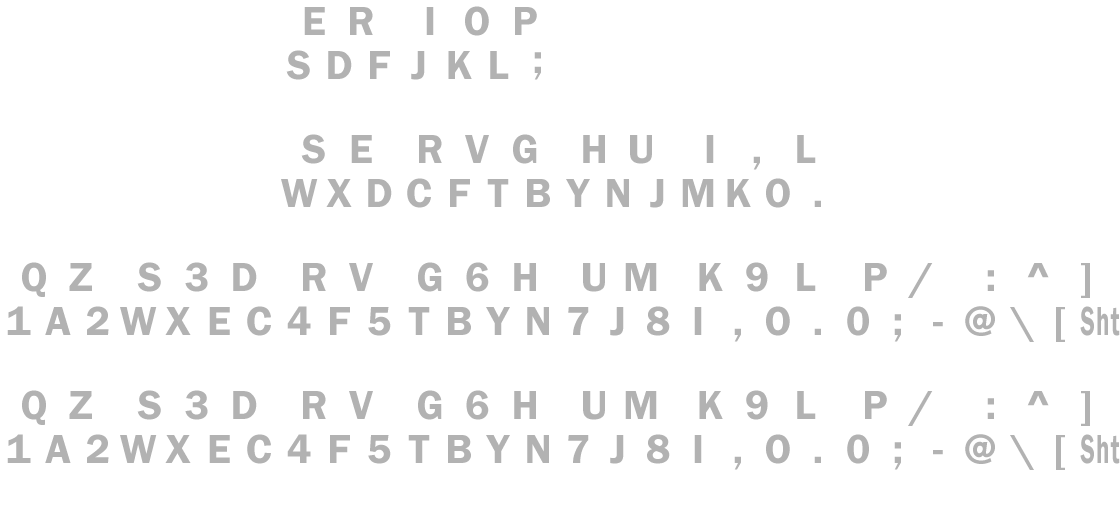
<style>
.page{position:relative;width:1120px;height:512px;background:#ffffff}
.page>*{position:absolute;margin:0}
.t1{font:42px "FranklinGothic-Demi";letter-spacing:0.05em;color:#b2b2b2}
.t2{font:42px "FranklinGothic-Demi";letter-spacing:0.05em;color:#b2b2b2;scale:0.59 1}
</style>
<div class="page">
<p class="t1" style="left:465px;top:6px;width:24px;height:30px">O</p>
<p class="t1" style="left:304px;top:7px;width:21px;height:28px">E</p>
<p class="t1" style="left:350px;top:7px;width:23px;height:28px">R</p>
<p class="t1" style="left:426px;top:7px;width:8px;height:28px">I</p>
<p class="t1" style="left:515px;top:7px;width:22px;height:28px">P</p>
<p class="t1" style="left:286px;top:50px;width:24px;height:30px">S</p>
<p class="t1" style="left:328px;top:51px;width:24px;height:28px">D</p>
<p class="t1" style="left:370px;top:51px;width:20px;height:28px">F</p>
<p class="t1" style="left:411px;top:51px;width:14px;height:29px">J</p>
<p class="t1" style="left:448px;top:51px;width:24px;height:28px">K</p>
<p class="t1" style="left:490px;top:51px;width:19px;height:28px">L</p>
<p class="t1" style="left:534px;top:52px;width:7px;height:28px">;</p>
<p class="t1" style="left:301px;top:134px;width:24px;height:30px">S</p>
<p class="t1" style="left:351px;top:135px;width:21px;height:28px">E</p>
<p class="t1" style="left:419px;top:135px;width:23px;height:28px">R</p>
<p class="t1" style="left:465px;top:135px;width:24px;height:28px">V</p>
<p class="t1" style="left:513px;top:134px;width:24px;height:30px">G</p>
<p class="t1" style="left:583px;top:135px;width:22px;height:28px">H</p>
<p class="t1" style="left:630px;top:135px;width:22px;height:29px">U</p>
<p class="t1" style="left:706px;top:135px;width:8px;height:28px">I</p>
<p class="t1" style="left:797px;top:135px;width:19px;height:28px">L</p>
<p class="t1" style="left:753px;top:156px;width:7px;height:14px">,</p>
<p class="t1" style="left:281px;top:179px;width:37px;height:28px">W</p>
<p class="t1" style="left:326px;top:179px;width:26px;height:28px">X</p>
<p class="t1" style="left:368px;top:179px;width:24px;height:28px">D</p>
<p class="t1" style="left:407px;top:178px;width:24px;height:30px">C</p>
<p class="t1" style="left:450px;top:179px;width:20px;height:28px">F</p>
<p class="t1" style="left:487px;top:179px;width:22px;height:28px">T</p>
<p class="t1" style="left:527px;top:179px;width:23px;height:28px">B</p>
<p class="t1" style="left:566px;top:179px;width:24px;height:28px">Y</p>
<p class="t1" style="left:607px;top:179px;width:22px;height:28px">N</p>
<p class="t1" style="left:650px;top:179px;width:14px;height:29px">J</p>
<p class="t1" style="left:682px;top:179px;width:32px;height:28px">M</p>
<p class="t1" style="left:727px;top:179px;width:24px;height:28px">K</p>
<p class="t1" style="left:766px;top:178px;width:24px;height:30px">O</p>
<p class="t1" style="left:814px;top:200px;width:7px;height:7px">.</p>
<p class="t1" style="left:22px;top:262px;width:24px;height:35px">Q</p>
<p class="t1" style="left:69px;top:263px;width:23px;height:28px">Z</p>
<p class="t1" style="left:137px;top:262px;width:24px;height:30px">S</p>
<p class="t1" style="left:185px;top:262px;width:23px;height:30px">3</p>
<p class="t1" style="left:233px;top:263px;width:24px;height:28px">D</p>
<p class="t1" style="left:303px;top:263px;width:23px;height:28px">R</p>
<p class="t1" style="left:349px;top:263px;width:24px;height:28px">V</p>
<p class="t1" style="left:418px;top:262px;width:24px;height:30px">G</p>
<p class="t1" style="left:466px;top:262px;width:23px;height:30px">6</p>
<p class="t1" style="left:514px;top:263px;width:22px;height:28px">H</p>
<p class="t1" style="left:583px;top:263px;width:22px;height:29px">U</p>
<p class="t1" style="left:625px;top:263px;width:32px;height:28px">M</p>
<p class="t1" style="left:699px;top:263px;width:24px;height:28px">K</p>
<p class="t1" style="left:746px;top:262px;width:22px;height:30px">9</p>
<p class="t1" style="left:797px;top:263px;width:19px;height:28px">L</p>
<p class="t1" style="left:865px;top:263px;width:22px;height:28px">P</p>
<p class="t1" style="left:908px;top:263px;width:25px;height:35px">/</p>
<p class="t1" style="left:987px;top:270px;width:7px;height:21px">:</p>
<p class="t1" style="left:1027px;top:263px;width:22px;height:15px">^</p>
<p class="t1" style="left:1081px;top:263px;width:9px;height:35px">]</p>
<p class="t1" style="left:7px;top:306px;width:24px;height:29px">1</p>
<p class="t1" style="left:45px;top:307px;width:26px;height:28px">A</p>
<p class="t1" style="left:87px;top:306px;width:22px;height:29px">2</p>
<p class="t1" style="left:120px;top:307px;width:37px;height:28px">W</p>
<p class="t1" style="left:165px;top:307px;width:26px;height:28px">X</p>
<p class="t1" style="left:209px;top:307px;width:21px;height:28px">E</p>
<p class="t1" style="left:247px;top:306px;width:24px;height:30px">C</p>
<p class="t1" style="left:287px;top:306px;width:24px;height:29px">4</p>
<p class="t1" style="left:330px;top:307px;width:20px;height:28px">F</p>
<p class="t1" style="left:368px;top:307px;width:23px;height:29px">5</p>
<p class="t1" style="left:408px;top:307px;width:22px;height:28px">T</p>
<p class="t1" style="left:448px;top:307px;width:23px;height:28px">B</p>
<p class="t1" style="left:486px;top:307px;width:24px;height:28px">Y</p>
<p class="t1" style="left:527px;top:307px;width:22px;height:28px">N</p>
<p class="t1" style="left:568px;top:307px;width:21px;height:28px">7</p>
<p class="t1" style="left:610px;top:307px;width:14px;height:29px">J</p>
<p class="t1" style="left:647px;top:306px;width:23px;height:30px">8</p>
<p class="t1" style="left:694px;top:307px;width:8px;height:28px">I</p>
<p class="t1" style="left:766px;top:306px;width:24px;height:30px">O</p>
<p class="t1" style="left:847px;top:306px;width:22px;height:30px">0</p>
<p class="t1" style="left:894px;top:314px;width:7px;height:28px">;</p>
<p class="t1" style="left:965px;top:306px;width:30px;height:30px">@</p>
<p class="t1" style="left:1010px;top:307px;width:24px;height:35px">\</p>
<p class="t1" style="left:1056px;top:307px;width:9px;height:35px">[</p>
<p class="t2" style="left:1080px;top:306px;width:40px;height:30px">Sht</p>
<p class="t1" style="left:734px;top:328px;width:7px;height:14px">,</p>
<p class="t1" style="left:814px;top:328px;width:7px;height:7px">.</p>
<p class="t1" style="left:933px;top:322px;width:10px;height:5px">-</p>
<p class="t1" style="left:22px;top:390px;width:24px;height:35px">Q</p>
<p class="t1" style="left:137px;top:390px;width:24px;height:30px">S</p>
<p class="t1" style="left:185px;top:390px;width:23px;height:30px">3</p>
<p class="t1" style="left:418px;top:390px;width:24px;height:30px">G</p>
<p class="t1" style="left:466px;top:390px;width:23px;height:30px">6</p>
<p class="t1" style="left:746px;top:390px;width:22px;height:30px">9</p>
<p class="t1" style="left:69px;top:391px;width:23px;height:28px">Z</p>
<p class="t1" style="left:233px;top:391px;width:24px;height:28px">D</p>
<p class="t1" style="left:303px;top:391px;width:23px;height:28px">R</p>
<p class="t1" style="left:349px;top:391px;width:24px;height:28px">V</p>
<p class="t1" style="left:514px;top:391px;width:22px;height:28px">H</p>
<p class="t1" style="left:583px;top:391px;width:22px;height:29px">U</p>
<p class="t1" style="left:625px;top:391px;width:32px;height:28px">M</p>
<p class="t1" style="left:699px;top:391px;width:24px;height:28px">K</p>
<p class="t1" style="left:797px;top:391px;width:19px;height:28px">L</p>
<p class="t1" style="left:865px;top:391px;width:22px;height:28px">P</p>
<p class="t1" style="left:908px;top:391px;width:25px;height:35px">/</p>
<p class="t1" style="left:987px;top:398px;width:7px;height:21px">:</p>
<p class="t1" style="left:1027px;top:391px;width:22px;height:15px">^</p>
<p class="t1" style="left:1081px;top:391px;width:9px;height:35px">]</p>
<p class="t1" style="left:7px;top:434px;width:24px;height:29px">1</p>
<p class="t1" style="left:45px;top:435px;width:26px;height:28px">A</p>
<p class="t1" style="left:87px;top:434px;width:22px;height:29px">2</p>
<p class="t1" style="left:120px;top:435px;width:37px;height:28px">W</p>
<p class="t1" style="left:165px;top:435px;width:26px;height:28px">X</p>
<p class="t1" style="left:209px;top:435px;width:21px;height:28px">E</p>
<p class="t1" style="left:247px;top:434px;width:24px;height:30px">C</p>
<p class="t1" style="left:287px;top:434px;width:24px;height:29px">4</p>
<p class="t1" style="left:330px;top:435px;width:20px;height:28px">F</p>
<p class="t1" style="left:368px;top:435px;width:23px;height:29px">5</p>
<p class="t1" style="left:408px;top:435px;width:22px;height:28px">T</p>
<p class="t1" style="left:448px;top:435px;width:23px;height:28px">B</p>
<p class="t1" style="left:486px;top:435px;width:24px;height:28px">Y</p>
<p class="t1" style="left:527px;top:435px;width:22px;height:28px">N</p>
<p class="t1" style="left:568px;top:435px;width:21px;height:28px">7</p>
<p class="t1" style="left:610px;top:435px;width:14px;height:29px">J</p>
<p class="t1" style="left:647px;top:434px;width:23px;height:30px">8</p>
<p class="t1" style="left:694px;top:435px;width:8px;height:28px">I</p>
<p class="t1" style="left:766px;top:434px;width:24px;height:30px">O</p>
<p class="t1" style="left:847px;top:434px;width:22px;height:30px">0</p>
<p class="t1" style="left:965px;top:434px;width:30px;height:30px">@</p>
<p class="t1" style="left:1010px;top:435px;width:24px;height:35px">\</p>
<p class="t1" style="left:1056px;top:435px;width:9px;height:35px">[</p>
<p class="t2" style="left:1080px;top:434px;width:40px;height:30px">Sht</p>
<p class="t1" style="left:894px;top:442px;width:7px;height:28px">;</p>
<p class="t1" style="left:734px;top:456px;width:7px;height:14px">,</p>
<p class="t1" style="left:814px;top:456px;width:7px;height:7px">.</p>
<p class="t1" style="left:933px;top:450px;width:10px;height:5px">-</p>
</div>
